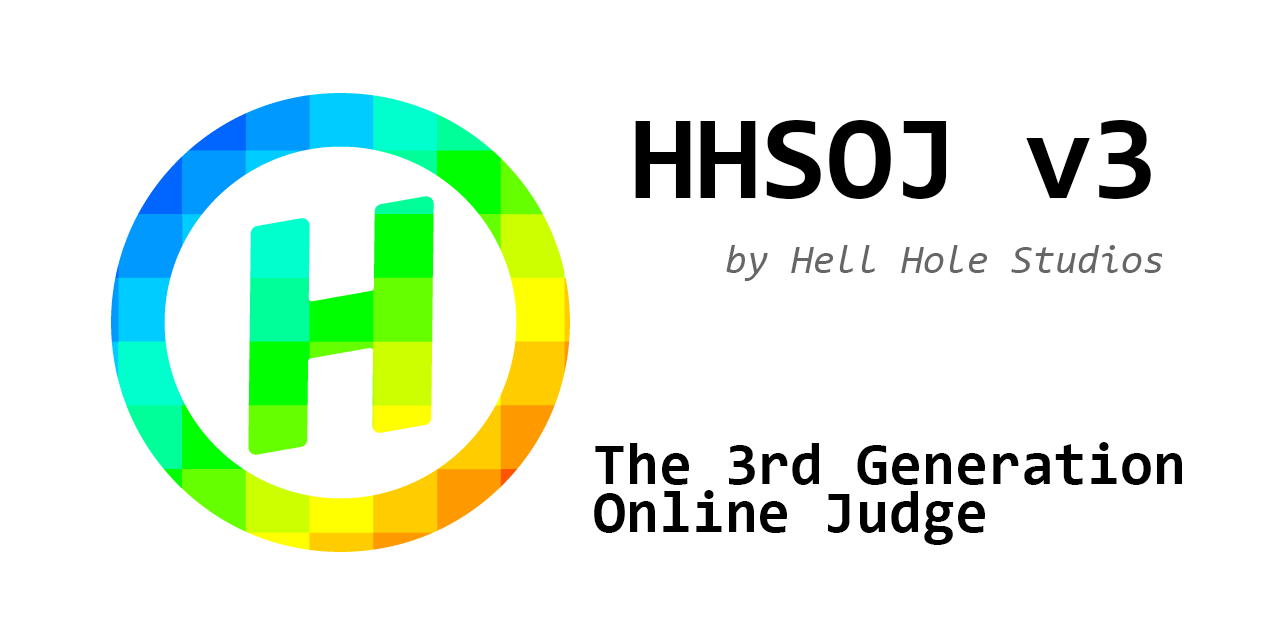
<style>
.page{position:relative;width:1280px;height:640px;background:#ffffff}
.page>*{position:absolute;margin:0}
.t1{font:120px "Consolas-Bold";color:#000000}
.t2{font:40px "Consolas-Italic";color:#666666}
.t3{font:60px/48px "Consolas-Bold";color:#000000}
</style>
<div class="page">
<p class="t1" style="left:635px;top:120px;width:516px;height:79px">HHSOJ v3</p>
<p class="t2" style="left:726px;top:245px;width:436px;height:36px">by Hell Hole Studios</p>
<p class="t3" style="left:594px;top:442px;width:588px;height:103px">The 3rd Generation<br>Online Judge</p>
</div>
